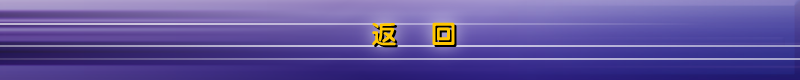
<style>
.page{position:relative;width:800px;height:80px}
.page>*{position:absolute;margin:0}
.t1{font:25.7px "FZY4JW--GB1-0";letter-spacing:0.2em;color:#ffc701}
.t2{font:25.7px "FZY4JW--GB1-0";letter-spacing:0.2em}
</style>
<div class="page">
<p class="t1" style="left:372px;top:22px;width:83px;height:24px">返  回</p>
<p class="t2" style="left:374px;top:24px;width:83px;height:24px">返  回</p>
</div>
